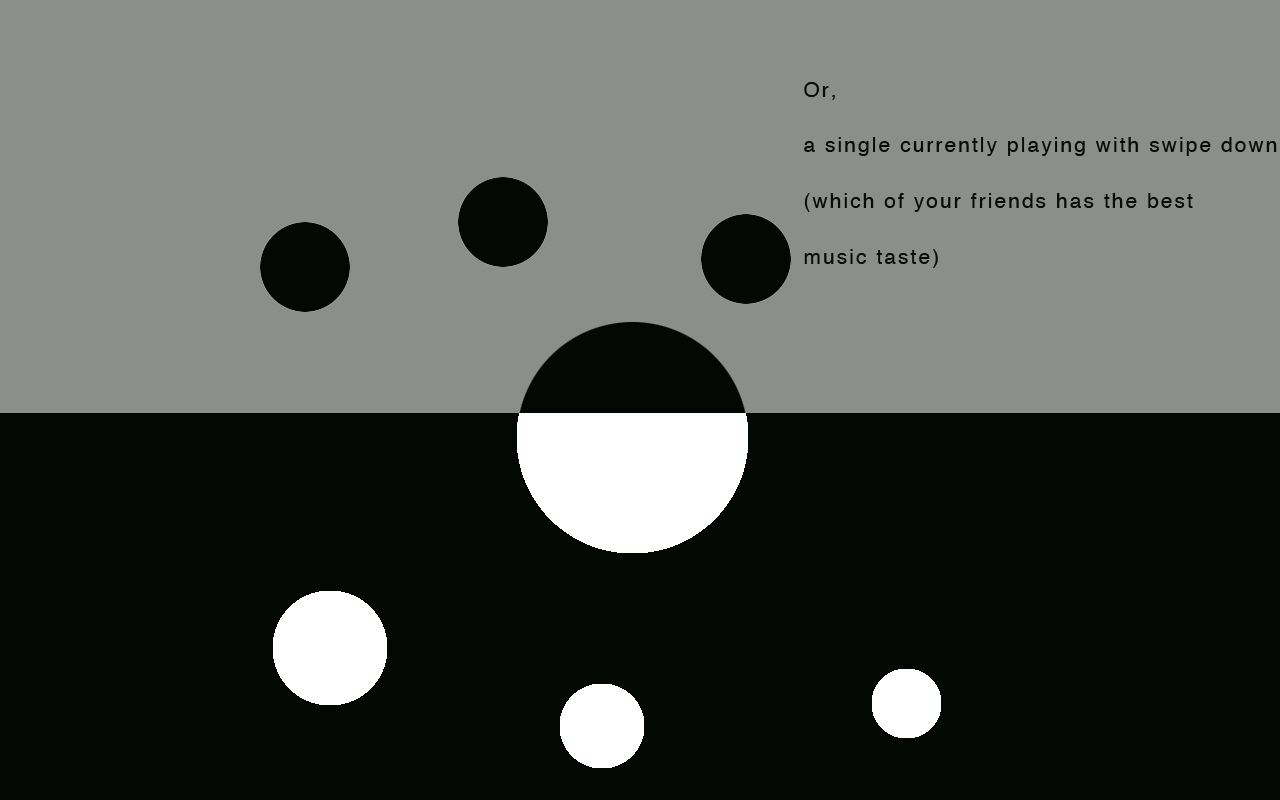
<style>
.page{position:relative;width:1280px;height:800px;background:#8c8e8c}
.page>*{position:absolute;margin:0}
.t1{font:20.9px/55.7px "Helvetica";letter-spacing:0.1em;color:#080b09}
</style>
<div class="page">
<p class="t1" style="left:804px;top:82px;width:473px;height:186px">Or,<br>a single currently playing with swipe down<br>(which of your friends has the best<br>music taste)</p>
</div>
